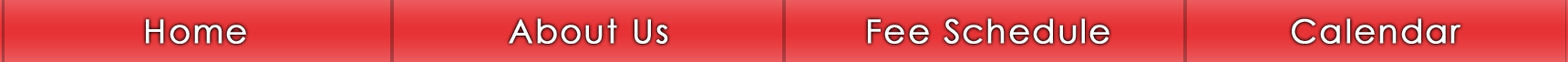
<style>
.page{position:relative;width:1568px;height:62px}
.page>*{position:absolute;margin:0}
.t1{font:32.8px "CenturyGothic";letter-spacing:0.05em;color:#ffffff;font-weight:bold}
</style>
<div class="page">
<p class="t1" style="left:146px;top:19px;width:100px;height:25px">Home</p>
<p class="t1" style="left:509px;top:18px;width:159px;height:26px">About Us</p>
<p class="t1" style="left:868px;top:18px;width:241px;height:26px">Fee Schedule</p>
<p class="t1" style="left:1292px;top:18px;width:169px;height:26px">Calendar</p>
</div>
